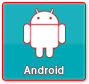
<style>
.page{position:relative;width:89px;height:84px;background:#00a8b5}
.page>*{position:absolute;margin:0}
.t1{font:11px "MyriadPro-Regular";letter-spacing:0.04em;color:#ffffff}
</style>
<div class="page">
<p class="t1" style="left:24px;top:66px;width:40px;height:8px">Android</p>
</div>
